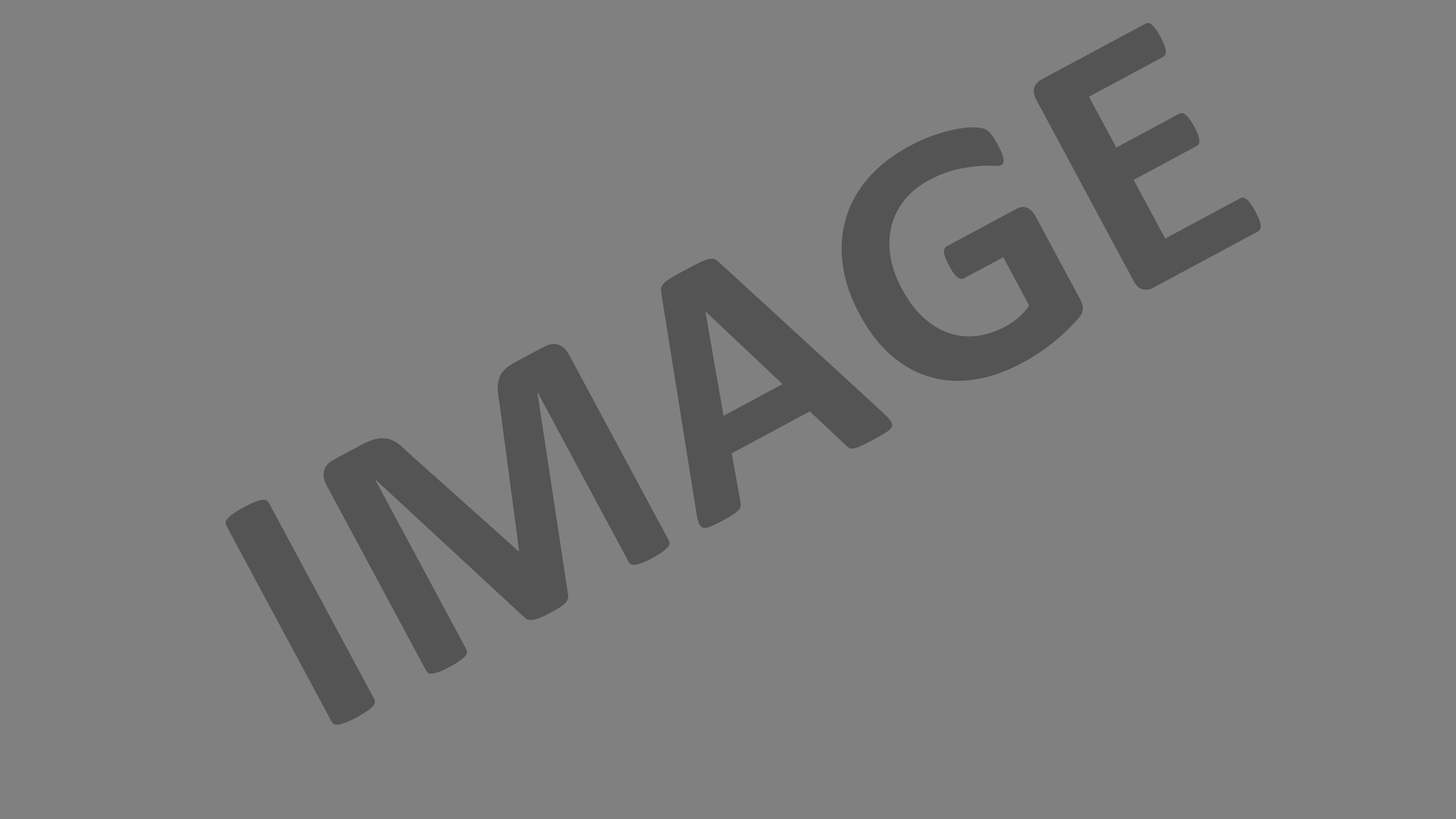
<style>
.page{position:relative;width:1456px;height:819px;background:#808080}
.page>*{position:absolute;margin:0}
.t1{font:373.9px "Calibri-Bold";letter-spacing:0.02em;color:#545454}
</style>
<div class="page">
<p class="t1" style="left:225px;top:23px;width:1036px;height:702px;rotate:-28deg">IMAGE</p>
</div>
